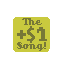
<style>
.page{position:relative;width:64px;height:64px;background:#ffffff}
.page>*{position:absolute;margin:0}
.t1{font:10px/8px "Superscript";color:#777837}
.t2{font:10px "Superscript";color:#777837}
.t3{font:20px/16px "MyriadPro-Regular";color:#777837}
.t4{font:20px/16px "Superscript";color:#777837}
</style>
<div class="page">
<p class="t1" style="left:17px;top:18px;width:30px;height:33px;text-align:center"><span class="t2">The<br> </span><span class="t3">$</span><span class="t4">1<br></span>Song!</p>
</div>
